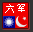
<style>
.page{position:relative;width:33px;height:32px;background:#f20000}
.page>*{position:absolute;margin:0}
.t1{font:10.4px "SimSun";color:#ffffff}
</style>
<div class="page">
<p class="t1" style="left:5px;top:4px;width:20px;height:9px">六军</p>
</div>
